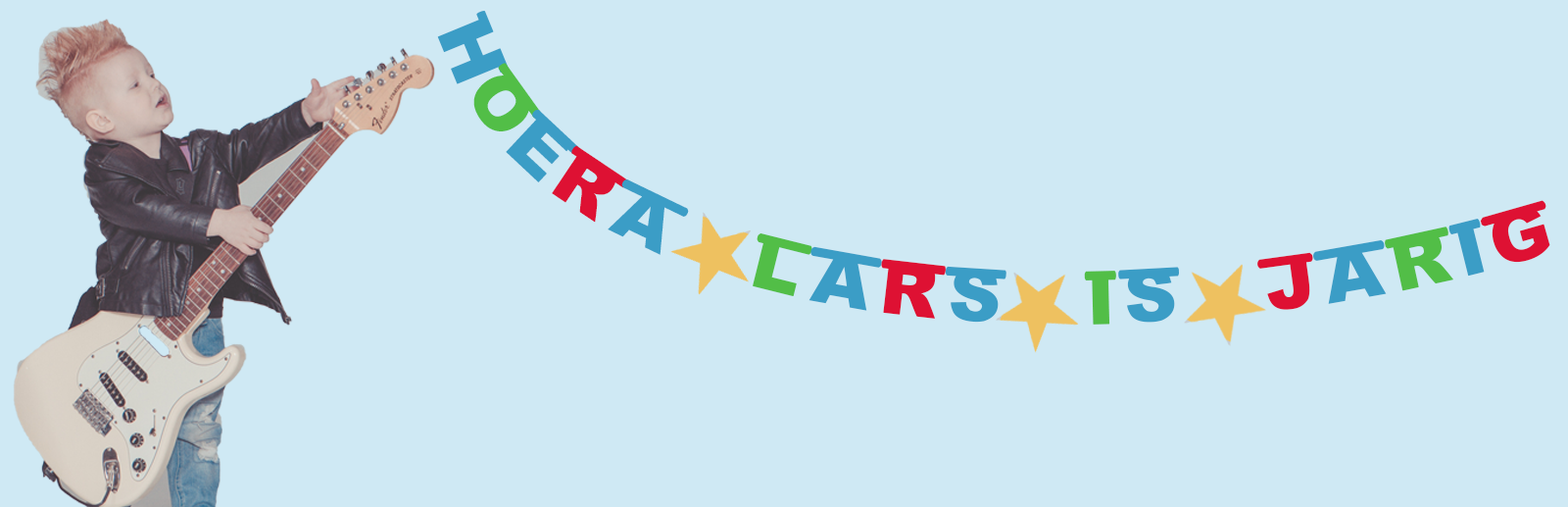
<style>
.page{position:relative;width:1568px;height:507px;background:#cfe9f4}
.page>*{position:absolute;margin:0}
.t1{font:106.6px "ArialBlackSlingers";letter-spacing:0.004em;color:#3b9dc6}
.t2{font:106.6px "ArialBlackSlingers";letter-spacing:0.004em;color:#52be47}
.t3{font:106.6px "ArialBlackSlingers";letter-spacing:0.004em;color:#de1133}
</style>
<div class="page">
<p class="t1" style="left:437px;top:11px;width:1113px;height:313px;rotate:-12deg">H<span class="t2">O</span>E<span class="t3">R</span>A   <span class="t2">L</span>A<span class="t3">R</span>S   <span class="t2">I</span>S   <span class="t3">J</span>A<span class="t2">R</span>I<span class="t3">G</span></p>
</div>
